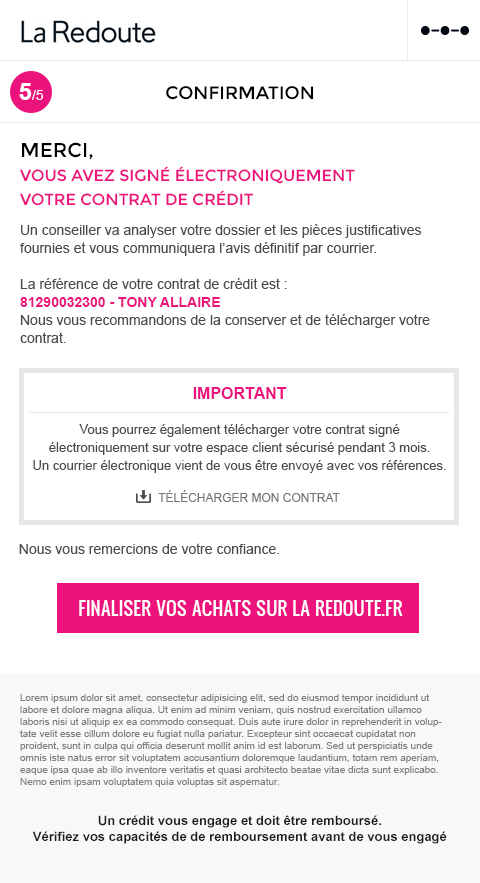
<style>
.page{position:relative;width:480px;height:883px;background:#ffffff}
.page>*{position:absolute;margin:0}
.t1{font:14px "ArialMT";color:#ffffff}
.t2{font:24px "Arial-BoldMT";color:#ffffff}
.t3{font:18px "Montserrat-Regular";color:#000000;text-transform:uppercase}
.t4{font:16px/24px "Montserrat-Regular";color:#ed137d;text-transform:uppercase}
.t5{font:20px/24px "Montserrat-Regular";color:#000000;text-transform:uppercase}
.t6{font:14px/18px "ArialMT";color:#4b4b4c}
.t7{font:14px/18px "Arial-BoldMT";color:#ed137d}
.t8{font:13px/18px "ArialMT";color:#4b4b4c}
.t9{font:16px/18px "Arial-BoldMT";color:#ed137d}
.t10{font:13px/35px "ArialMT";color:#4b4b4c}
.t11{font:12px "ArialMT";color:#737373;text-transform:uppercase}
.t12{font:14px "ArialMT";color:#4b4b4c}
.t13{font:18px "Oswald";color:#ffffff;text-transform:uppercase}
.t14{font:10px "ArialMT";color:#7f7f7f}
.t15{font:13px "Arial-BoldMT";color:#1d1d1d}
</style>
<div class="page">
<p class="t1" style="left:19px;top:83px;width:24px;height:17px"><span class="t2">5</span>/5</p>
<p class="t3" style="left:166px;top:86px;width:148px;height:14px">confirmation</p>
<p class="t4" style="left:20px;top:142px;width:335px;height:64px"><span class="t5">merci,<br></span>vous avez signé électroniquement<br>votre contrat de crédit</p>
<p class="t6" style="left:20px;top:224px;width:410px;height:119px">Un conseiller va analyser votre dossier et les pièces justificatives<br>fournies et vous communiquera l’avis définitif par courrier.<br><br>La référence de votre contrat de crédit est :<br><span class="t7">81290032300 - TONY ALLAIRE<br></span>Nous vous recommandons de la conserver et de télécharger votre contrat.</p>
<p class="t8" style="left:33px;top:387px;width:413px;height:86px;text-align:center"><span class="t9">IMPORTANT<br></span><span class="t10">Vous pourrez également télécharger votre contrat signé<br></span>électroniquement sur votre espace client sécurisé pendant 3 mois.<br>Un courrier électronique vient de vous être envoyé avec vos références.</p>
<p class="t11" style="left:158px;top:490px;width:182px;height:12px">télécharger mon contrat</p>
<p class="t12" style="left:19px;top:543px;width:260px;height:11px">Nous vous remercions de votre confiance.</p>
<p class="t13" style="left:79px;top:600px;width:324px;height:16px">finaliser vos achats sur la redoute.fr</p>
<p class="t14" style="left:20px;top:694px;width:422px;height:93px">Lorem ipsum dolor sit amet, consectetur adipisicing elit, sed do eiusmod tempor incididunt ut labore et dolore magna aliqua. Ut enim ad minim veniam, quis nostrud exercitation ullamco laboris nisi ut aliquip ex ea commodo consequat. Duis aute irure dolor in reprehenderit in voluptate velit esse cillum dolore eu fugiat nulla pariatur. Excepteur sint occaecat cupidatat non proident, sunt in culpa qui officia deserunt mollit anim id est laborum. Sed ut perspiciatis unde omnis iste natus error sit voluptatem accusantium doloremque laudantium, totam rem aperiam, eaque ipsa quae ab illo inventore veritatis et quasi architecto beatae vitae dicta sunt explicabo. Nemo enim ipsam voluptatem quia voluptas sit aspernatur.</p>
<p class="t15" style="left:32px;top:815px;width:415px;height:29px;text-align:center">Un crédit vous engage et doit être remboursé.<br>Vérifiez vos capacités de de remboursement avant de vous engagé</p>
</div>
